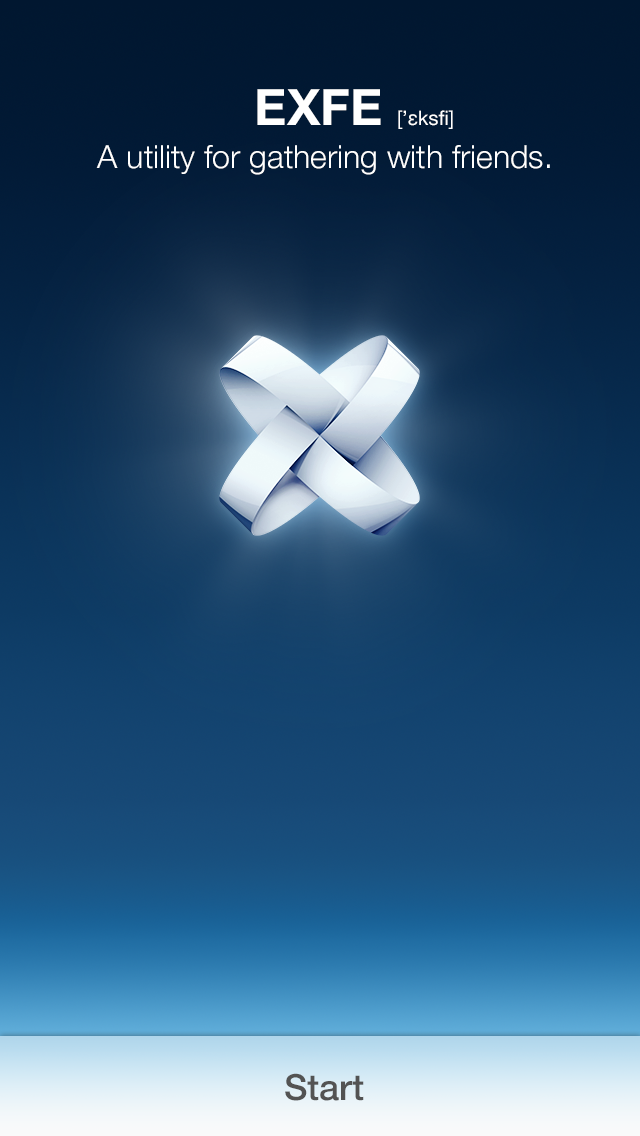
<style>
.page{position:relative;width:640px;height:1136px}
.page>*{position:absolute;margin:0}
.t1{font:32px/43px "HelveticaNeue-Light";color:#ffffff}
.t2{font:42px/43px "HelveticaNeue-Bold";color:#ffffff}
.t3{font:50px/43px "HelveticaNeue-Bold";color:#ffffff}
.t4{font:20px/43px "HelveticaNeue";color:#ffffff}
.t5{font:36px "HelveticaNeue-Medium";color:#535353}
</style>
<div class="page">
<p class="t1" style="left:96px;top:89px;width:454px;height:86px;text-align:center"><span class="t2">     </span><span class="t3">EXFE </span><span class="t4">[’ɛksfi]<br></span>A utility for gathering with friends.</p>
<p class="t5" style="left:285px;top:1073px;width:79px;height:28px">Start</p>
</div>
